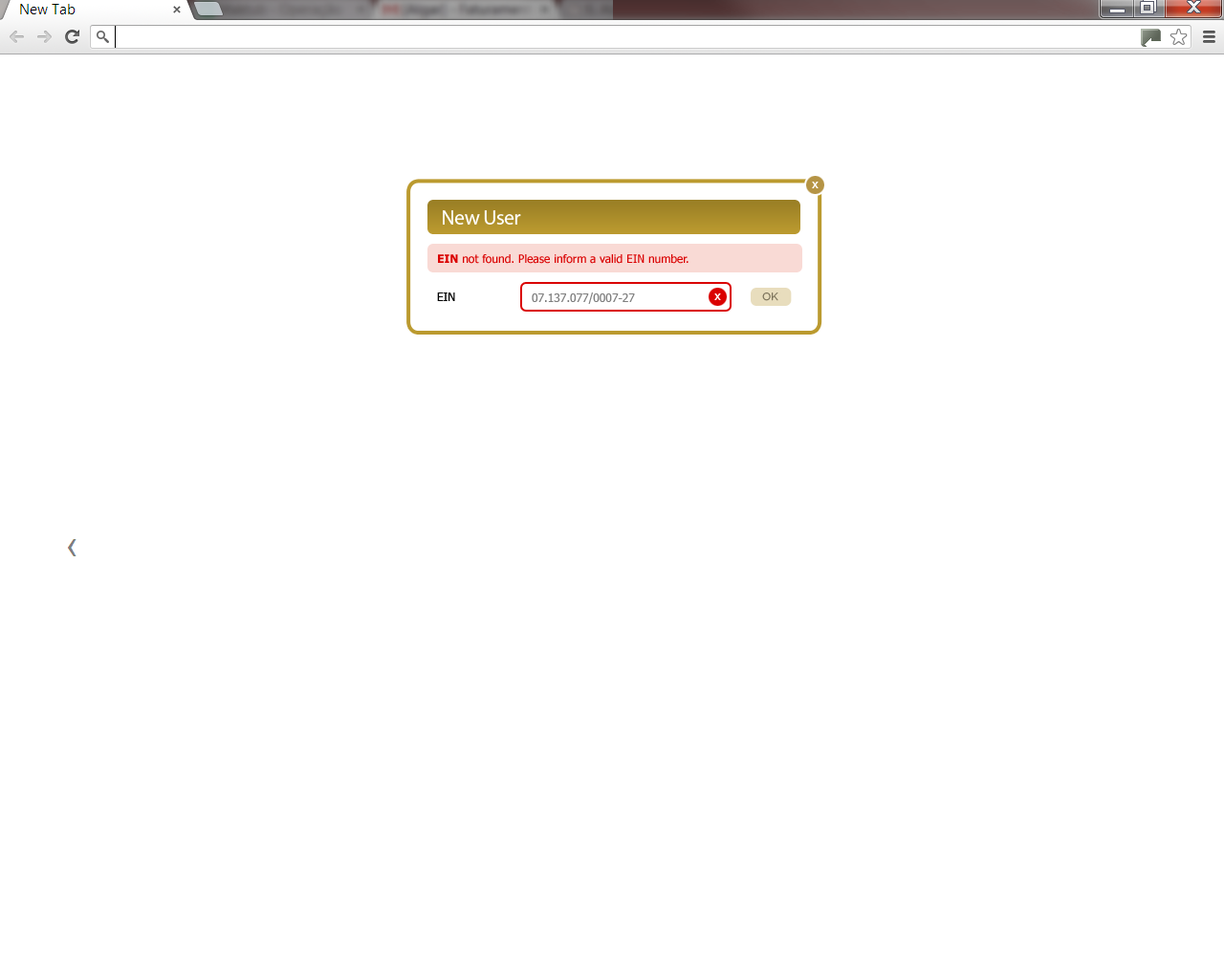
<style>
.page{position:relative;width:1224px;height:974px;background:#ffffff}
.page>*{position:absolute;margin:0}
.t1{font:21px "MyriadPro-Regular";letter-spacing:-0.025em;color:#ffffff}
.t2{font:11.5px "Tahoma";color:#da0000}
.t3{font:11.5px "Tahoma-Bold";color:#da0000}
.t4{font:11.5px "Tahoma";color:#000000}
.t5{font:11.5px "Tahoma";color:#7f7f7f}
.t6{font:9.6px "GothamHTF-Bold";letter-spacing:-0.04em;color:#ffffff;text-transform:uppercase}
.t7{font:10.5px "Gotham-Book";letter-spacing:-0.025em;color:#7e755d}
</style>
<div class="page">
<p class="t1" style="left:443px;top:210px;width:78px;height:15px">New User</p>
<p class="t2" style="left:438px;top:254px;width:250px;height:10px"><span class="t3">EIN</span> not found. Please inform a valid EIN number.</p>
<p class="t4" style="left:437px;top:293px;width:18px;height:8px">EIN</p>
<p class="t5" style="left:532px;top:293px;width:103px;height:11px">07.137.077/0007-27</p>
<p class="t6" style="left:714px;top:294px;width:7px;height:6px">X</p>
<p class="t7" style="left:762px;top:293px;width:16px;height:8px">OK</p>
</div>
